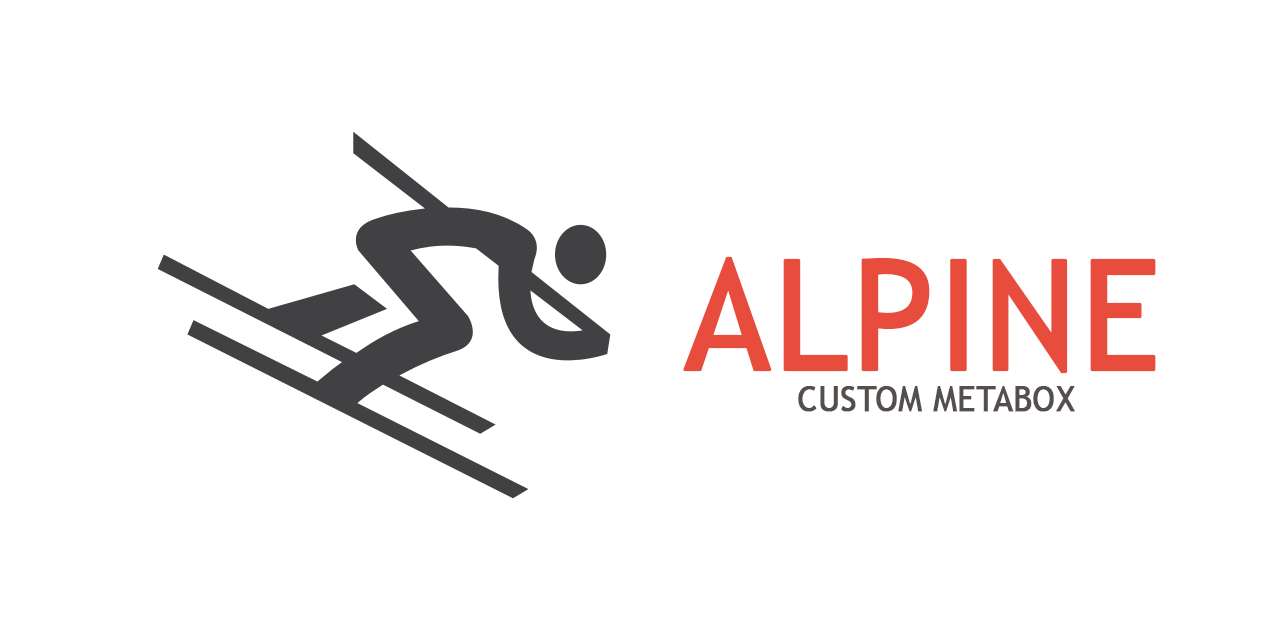
<style>
.page{position:relative;width:1280px;height:640px;background:#ffffff}
.page>*{position:absolute;margin:0}
.t1{font:154.5px "TrebuchetMS";color:#e74c3c;font-weight:bold;scale:0.95 1}
.t2{font:34.6px "TrebuchetMS";color:#544e4d;font-weight:bold;scale:0.95 1}
</style>
<div class="page">
<p class="t1" style="left:683px;top:256px;width:473px;height:118px">ALPINE</p>
<p class="t2" style="left:798px;top:386px;width:277px;height:26px">CUSTOM METABOX</p>
</div>
